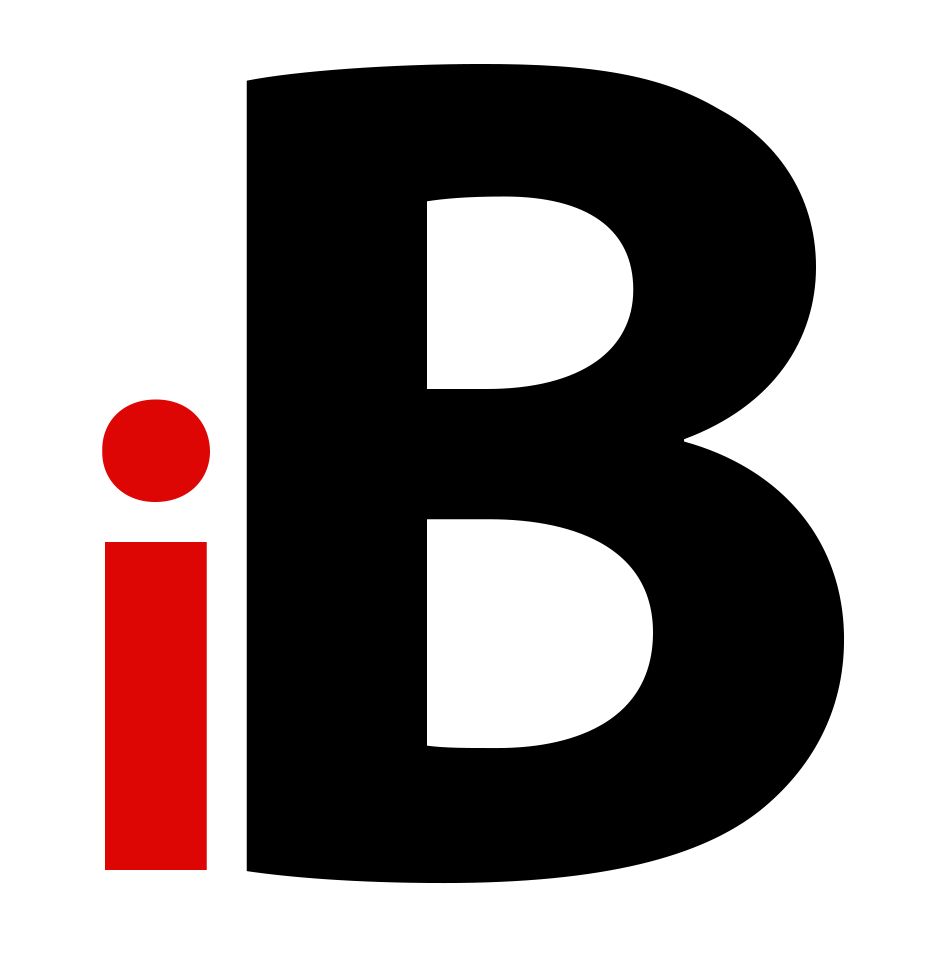
<style>
.page{position:relative;width:937px;height:977px;background:#ffffff}
.page>*{position:absolute;margin:0}
.t1{font:1193.9px "MyriadPro-Bold";color:#000000}
.t2{font:669.9px "MyriadPro-Bold";color:#de0505}
</style>
<div class="page">
<p class="t1" style="left:246px;top:64px;width:599px;height:820px">B</p>
<p class="t2" style="left:102px;top:399px;width:108px;height:471px">i</p>
</div>
